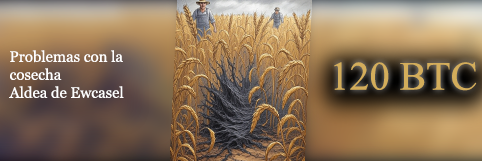
<style>
.page{position:relative;width:482px;height:161px}
.page>*{position:absolute;margin:0}
.t1{font:15px "Georgia";color:#ffffff}
.t2{font:40px "MongolianBaiti";color:#d3ad5b}
</style>
<div class="page">
<p class="t1" style="left:9px;top:50px;width:115px;height:48px">Problemas con la cosecha<br>Aldea de Ewcasel</p>
<p class="t2" style="left:334px;top:62px;width:143px;height:29px">120 BTC</p>
</div>
